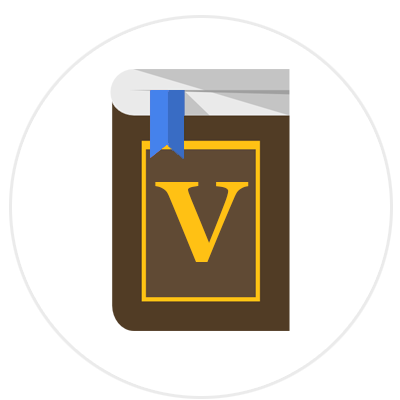
<style>
.page{position:relative;width:400px;height:400px;background:#ffffff}
.page>*{position:absolute;margin:0}
.t1{font:114.3px "Georgia-Bold";color:#ffc114}
</style>
<div class="page">
<p class="t1" style="left:155px;top:182px;width:94px;height:80px">V</p>
</div>
